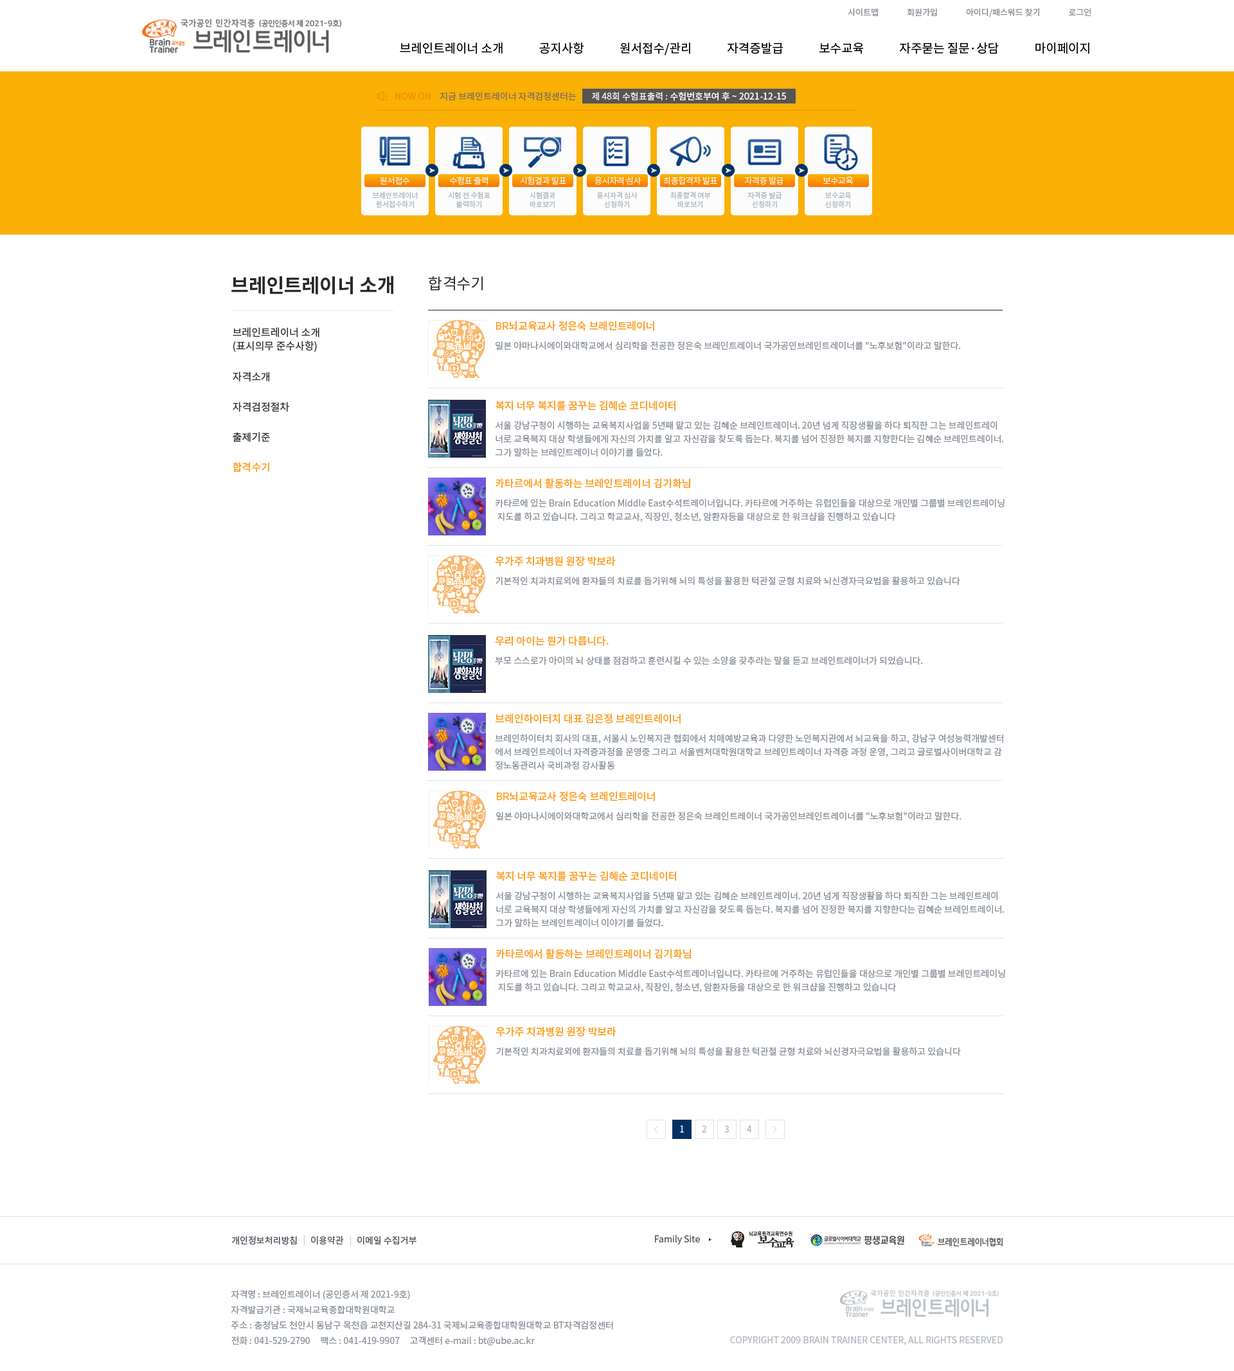
<style>
.page{position:relative;width:1234px;height:1371px;background:#ffffff}
.page>*{position:absolute;margin:0}
.t1{font:8.4px "NotoSansCJKkr-Regular";letter-spacing:0.001em;color:#868e96}
.t2{font:12.2px "NotoSansCJKkr-Regular";color:#000000}
.t3{font:9px "NotoSansCJKkr-Regular";color:#f08c00}
.t4{font:9px "NotoSansCJKkr-Regular";color:#7c6d5d}
.t5{font:9px "NotoSansCJKkr-Medium";color:#f8f8f8}
.t6{font:9px "NotoSansCJKkr-Regular";color:#f8f8f8}
.t7{font:8.4px "NotoSansCJKkr-Light";letter-spacing:-0.025em;color:#fcfcfc}
.t8{font:7.1px/9px "NotoSansCJKkr-Regular";color:#adb5bd}
.t9{font:19.3px "NotoSansCJKkr-Bold";color:#2b2b2b}
.t10{font:15.4px "NotoSansCJKkr-Regular";color:#2b2b2b}
.t11{font:10.3px/13.5px "NotoSansCJKkr-Regular";color:#2b2b2b}
.t12{font:10.3px "NotoSansCJKkr-Medium";color:#fd9f27}
.t13{font:9px "NotoSansCJKkr-Regular";color:#868e96}
.t14{font:10.3px "NotoSansCJKkr-Regular";color:#2b2b2b}
.t15{font:9px/13.5px "NotoSansCJKkr-Regular";color:#868e96}
.t16{font:9px "NotoSansCJKkr-Regular";color:#ffffff}
.t17{font:9px "NotoSansCJKkr-Regular";color:#adb5bd}
.t18{font:9px "NotoSansCJKkr-Regular";color:#495057}
.t19{font:9px "NotoSansCJKkr-Regular";color:#ced4da}
.t20{font:9px/15.4px "NotoSansCJKkr-Regular";color:#868e96}
</style>
<div class="page">
<p class="t1" style="left:848px;top:8px;width:244px;height:9px">사이트맵               회원가입               아이디/패스워드 찾기               로그인</p>
<p class="t2" style="left:400px;top:42px;width:690px;height:13px">브레인트레이너 소개             공지사항             원서접수/관리             자격증발급             보수교육             자주묻는 질문·상담             마이페이지</p>
<p class="t3" style="left:395px;top:93px;width:36px;height:7px">NOW ON</p>
<p class="t4" style="left:440px;top:92px;width:137px;height:9px">지금 브레인트레이너 자격검정센터는</p>
<p class="t5" style="left:592px;top:92px;width:194px;height:9px"><span class="t6">제 48회 수험표출력 : </span>수험번호부여 후 ~ 2021-12-15</p>
<p class="t7" style="left:380px;top:177px;width:30px;height:8px">원서접수</p>
<p class="t7" style="left:450px;top:176px;width:38px;height:9px">수험표 출력</p>
<p class="t7" style="left:520px;top:176px;width:46px;height:8px">시험결과 발표</p>
<p class="t7" style="left:595px;top:176px;width:47px;height:9px">응시자격 심사</p>
<p class="t7" style="left:663px;top:176px;width:54px;height:9px">최종합격자 발표</p>
<p class="t7" style="left:745px;top:176px;width:39px;height:9px">자격증 발급</p>
<p class="t7" style="left:823px;top:177px;width:30px;height:8px">보수교육</p>
<p class="t8" style="left:373px;top:192px;width:45px;height:16px;text-align:center">브레인트레이너<br>원서접수하기</p>
<p class="t8" style="left:448px;top:192px;width:43px;height:16px;text-align:center">시험 전 수험표<br>출력하기</p>
<p class="t8" style="left:530px;top:192px;width:25px;height:16px;text-align:center">시험결과<br>바로보기</p>
<p class="t8" style="left:597px;top:192px;width:41px;height:16px;text-align:center">응시자격 심사<br>신청하기</p>
<p class="t8" style="left:670px;top:192px;width:41px;height:16px;text-align:center">최종합격 여부<br>바로보기</p>
<p class="t8" style="left:748px;top:192px;width:34px;height:16px;text-align:center">자격증 발급<br>신청하기</p>
<p class="t8" style="left:825px;top:192px;width:27px;height:16px;text-align:center">보수교육<br>신청하기</p>
<p class="t9" style="left:231px;top:276px;width:162px;height:18px">브레인트레이너 소개</p>
<p class="t10" style="left:429px;top:276px;width:54px;height:15px">합격수기</p>
<p class="t11" style="left:233px;top:327px;width:87px;height:25px">브레인트레이너 소개<br>(표시의무 준수사항)</p>
<p class="t12" style="left:496px;top:321px;width:158px;height:10px">BR뇌교육교사 정은숙 브레인트레이너</p>
<p class="t13" style="left:496px;top:341px;width:465px;height:9px">일본 야마나시에이와대학교에서 심리학을 전공한 정은숙 브레인트레이너 국가공인브레인트레이너를 "노후보험"이라고 말한다.</p>
<p class="t14" style="left:233px;top:372px;width:36px;height:10px">자격소개</p>
<p class="t14" style="left:233px;top:402px;width:56px;height:10px">자격검정절차</p>
<p class="t12" style="left:496px;top:401px;width:180px;height:10px">복지 너무 복지를 꿈꾸는 김혜순 코디네이터</p>
<p class="t15" style="left:495px;top:420px;width:509px;height:37px">서울 강남구청이 시행하는 교육복지사업을 5년째 맡고 있는 김혜순 브레인트레이너. 20년 넘게 직장생활을 하다 퇴직한 그는 브레인트레이<br>너로 교육복지 대상 학생들에게 자신의 가치를 알고 자신감을 찾도록 돕는다. 복지를 넘어 진정한 복지를 지향한다는 김혜순 브레인트레이너.<br>그가 말하는 브레인트레이너 이야기를 들었다.</p>
<p class="t14" style="left:233px;top:432px;width:37px;height:10px">출제기준</p>
<p class="t12" style="left:233px;top:462px;width:36px;height:11px">합격수기</p>
<p class="t12" style="left:496px;top:478px;width:194px;height:11px">카타르에서 활동하는 브레인트레이너 김기화님</p>
<p class="t15" style="left:495px;top:499px;width:510px;height:23px">카타르에 있는 Brain Education Middle East수석트레이너입니다. 카타르에 거주하는 유럽인들을 대상으로 개인별 그룹별 브레인트레이닝<br> 지도를 하고 있습니다. 그리고 학교교사, 직장인, 청소년, 암환자등을 대상으로 한 워크샵을 진행하고 있습니다</p>
<p class="t12" style="left:495px;top:556px;width:121px;height:10px">우가주 치과병원 원장 박보라</p>
<p class="t13" style="left:496px;top:576px;width:464px;height:10px">기본적인 치과치료외에 환쟈들의 치료를 돕기위해 뇌의 특성을 활용한 턱관절 균형 치료와 뇌신경자극요법을 활용하고 있습니다</p>
<p class="t12" style="left:495px;top:636px;width:114px;height:10px">우리 아이는 뭔가 다릅니다.</p>
<p class="t13" style="left:495px;top:656px;width:428px;height:9px">부모 스스로가 아이의 뇌 상태를 점검하고 훈련시킬 수 있는 소양을 갖추라는 말을 듣고 브레인트레이너가 되었습니다.</p>
<p class="t12" style="left:495px;top:714px;width:186px;height:10px">브레인하이터치 대표 김은정 브레인트레이너</p>
<p class="t15" style="left:495px;top:734px;width:509px;height:36px">브레인하이터치 회사의 대표, 서울시 노인복지관 협회에서 치매예방교육과 다양한 노인복지관에서 뇌교육을 하고, 강남구 여성능력개발센터<br>에서 브레인트레이너 자격증과정을 운영중 그리고 서울벤처대학원대학교 브레인트레이너 자격증 과정 운영, 그리고 글로벌사이버대학교 감<br>정노동관리사 국비과정 강사활동</p>
<p class="t12" style="left:497px;top:791px;width:158px;height:11px">BR뇌교육교사 정은숙 브레인트레이너</p>
<p class="t13" style="left:496px;top:812px;width:466px;height:9px">일본 야마나시에이와대학교에서 심리학을 전공한 정은숙 브레인트레이너 국가공인브레인트레이너를 "노후보험"이라고 말한다.</p>
<p class="t12" style="left:496px;top:871px;width:180px;height:10px">복지 너무 복지를 꿈꾸는 김혜순 코디네이터</p>
<p class="t15" style="left:496px;top:891px;width:509px;height:37px">서울 강남구청이 시행하는 교육복지사업을 5년째 맡고 있는 김혜순 브레인트레이너. 20년 넘게 직장생활을 하다 퇴직한 그는 브레인트레이<br>너로 교육복지 대상 학생들에게 자신의 가치를 알고 자신감을 찾도록 돕는다. 복지를 넘어 진정한 복지를 지향한다는 김혜순 브레인트레이너.<br>그가 말하는 브레인트레이너 이야기를 들었다.</p>
<p class="t12" style="left:496px;top:949px;width:195px;height:10px">카타르에서 활동하는 브레인트레이너 김기화님</p>
<p class="t15" style="left:496px;top:969px;width:509px;height:24px">카타르에 있는 Brain Education Middle East수석트레이너입니다. 카타르에 거주하는 유럽인들을 대상으로 개인별 그룹별 브레인트레이닝<br> 지도를 하고 있습니다. 그리고 학교교사, 직장인, 청소년, 암환자등을 대상으로 한 워크샵을 진행하고 있습니다</p>
<p class="t12" style="left:496px;top:1027px;width:120px;height:10px">우가주 치과병원 원장 박보라</p>
<p class="t13" style="left:496px;top:1047px;width:465px;height:9px">기본적인 치과치료외에 환쟈들의 치료를 돕기위해 뇌의 특성을 활용한 턱관절 균형 치료와 뇌신경자극요법을 활용하고 있습니다</p>
<p class="t16" style="left:680px;top:1126px;width:4px;height:7px">1</p>
<p class="t17" style="left:702px;top:1126px;width:4px;height:7px">2</p>
<p class="t17" style="left:724px;top:1126px;width:5px;height:7px">3</p>
<p class="t17" style="left:747px;top:1126px;width:5px;height:7px">4</p>
<p class="t18" style="left:231px;top:1236px;width:66px;height:9px">개인정보처리방침</p>
<p class="t19" style="left:303px;top:1236px;width:2px;height:10px">|</p>
<p class="t18" style="left:311px;top:1236px;width:33px;height:9px">이용약관</p>
<p class="t19" style="left:350px;top:1236px;width:1px;height:10px">|</p>
<p class="t18" style="left:357px;top:1236px;width:60px;height:9px">이메일 수집거부</p>
<p class="t18" style="left:655px;top:1235px;width:45px;height:10px">Family Site</p>
<p class="t20" style="left:231px;top:1290px;width:382px;height:56px">자격명 : 브레인트레이너 (공인증서 제 2021-9호)<br>자격발급기관 : 국제뇌교육종합대학원대학교<br>주소 : 충청남도 천안시 동남구 목천읍 교천지산길 284-31 국제뇌교육종합대학원대학교 BT자격검정센터<br>전화 : 041-529-2790     팩스 : 041-419-9907     고객센터 e-mail : bt@ube.ac.kr</p>
<p class="t17" style="left:730px;top:1336px;width:273px;height:10px">COPYRIGHT 2009 BRAIN TRAINER CENTER, ALL RIGHTS RESERVED</p>
</div>
